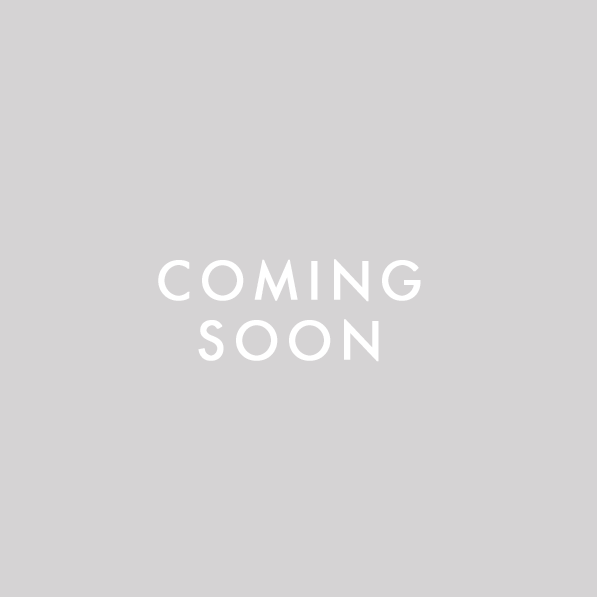
<style>
.page{position:relative;width:597px;height:597px;background:#d5d3d4}
.page>*{position:absolute;margin:0}
.t1{font:50px "FuturaStd-Medium";letter-spacing:0.2em;color:#ffffff;font-weight:bold}
</style>
<div class="page">
<p class="t1" style="left:158px;top:259px;width:263px;height:103px;text-align:center">COMING <br>SOON</p>
</div>
